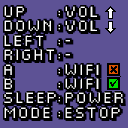
<style>
.page{position:relative;width:128px;height:128px;background:#5d5295}
.page>*{position:absolute;margin:0}
.t1{font:12px "Fipps-Regular";color:#000000}
</style>
<div class="page">
<p class="t1" style="left:2px;top:5px;width:57px;height:116px">UP<br>DOWN<br>LEFT<br>RIGHT<br>A<br>B<br>SLEEP<br>MODE</p>
<p class="t1" style="left:64px;top:5px;width:62px;height:116px">VOL<br>VOL<br>-<br>-<br>WIFI<br>WIFI<br>POWER<br>ESTOP</p>
<p class="t1" style="left:57px;top:9px;width:7px;height:111px">:<br>:<br>:<br>:<br>:<br>:<br>:<br>:</p>
</div>
